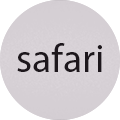
<style>
.page{position:relative;width:120px;height:120px;background:#d5cfd4}
.page>*{position:absolute;margin:0}
.t1{font:39.6px "MyriadPro-Regular";color:#1d171c}
</style>
<div class="page">
<p class="t1" style="left:17px;top:43px;width:85px;height:29px">safari</p>
</div>
